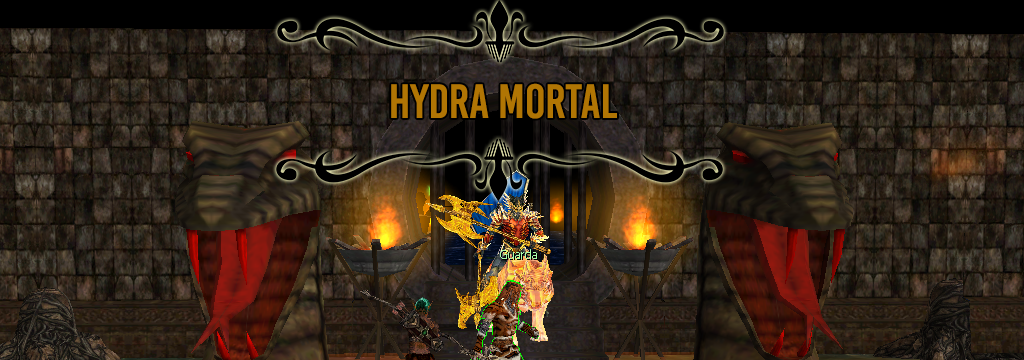
<style>
.page{position:relative;width:1024px;height:360px}
.page>*{position:absolute;margin:0}
.t1{font:48px "BebasKai";color:#b07504}
</style>
<div class="page">
<p class="t1" style="left:391px;top:83px;width:226px;height:36px">hydra mortal</p>
</div>
